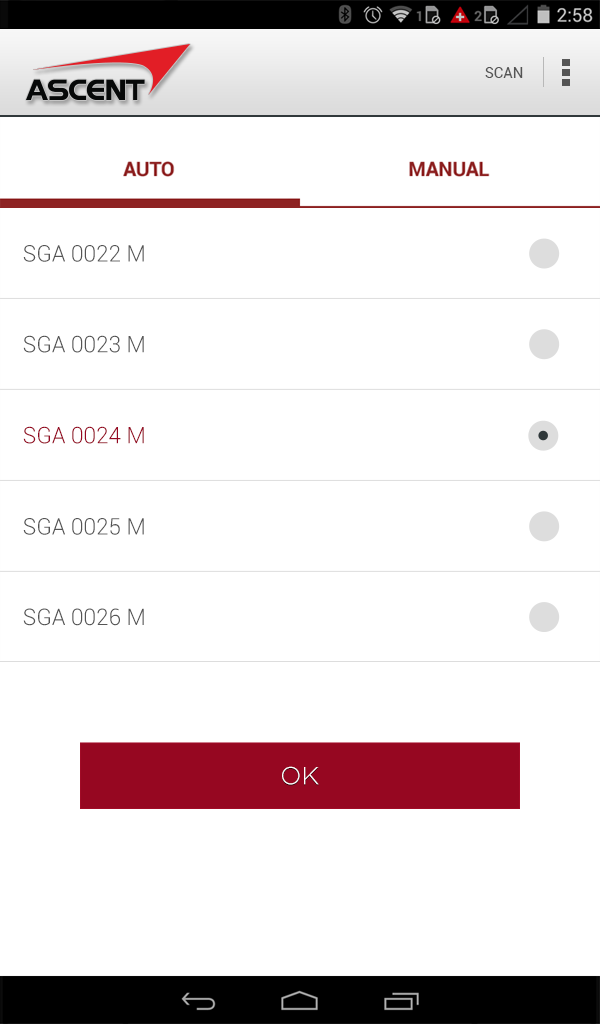
<style>
.page{position:relative;width:600px;height:1024px;background:#ffffff}
.page>*{position:absolute;margin:0}
.t1{font:15px "Roboto-Regular";color:#545454}
.t2{font:22.5px "Roboto-Light";color:#555555}
.t3{font:22.5px "Roboto-Light";color:#960721}
.t4{font:24.8px "Gotham-Light";color:#ffffff}
</style>
<div class="page">
<p class="t1" style="left:485px;top:67px;width:38px;height:11px">SCAN</p>
<p class="t2" style="left:23px;top:245px;width:121px;height:17px">SGA 0022 M</p>
<p class="t2" style="left:23px;top:335px;width:121px;height:18px">SGA 0023 M</p>
<p class="t3" style="left:23px;top:426px;width:121px;height:18px">SGA 0024 M</p>
<p class="t2" style="left:23px;top:518px;width:121px;height:17px">SGA 0025 M</p>
<p class="t2" style="left:23px;top:608px;width:121px;height:18px">SGA 0026 M</p>
<p class="t4" style="left:282px;top:766px;width:37px;height:19px">OK</p>
</div>
